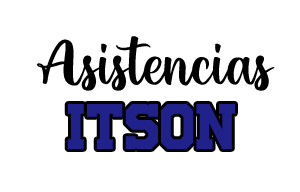
<style>
.page{position:relative;width:300px;height:192px;background:#ffffff}
.page>*{position:absolute;margin:0}
.t1{font:70px "HelloValentica-Regular";color:#000000}
.t2{font:45px "UniversityRegular";color:#21218b}
</style>
<div class="page">
<p class="t1" style="left:37px;top:36px;width:238px;height:55px">Asistencias</p>
<p class="t2" style="left:67px;top:104px;width:168px;height:45px">ITSON</p>
</div>
